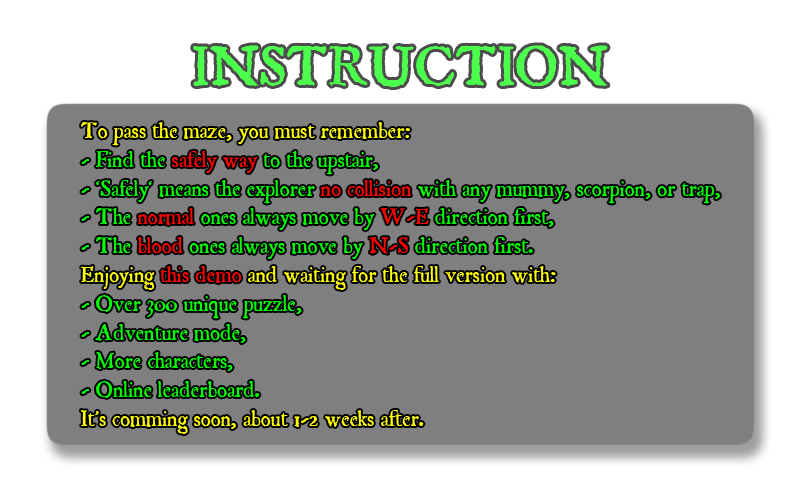
<style>
.page{position:relative;width:800px;height:480px;background:#7f7f7f}
.page>*{position:absolute;margin:0}
.t1{font:60px "JSL-Ancient";color:#4cff4c}
.t2{font:24px "JSL-Ancient";color:#00ff00}
.t3{font:24px "JSL-Ancient";color:#ffff00}
.t4{font:24px "JSL-Ancient";color:#ff0000}
</style>
<div class="page">
<p class="t1" style="left:193px;top:45px;width:415px;height:42px">INSTRUCTION</p>
<p class="t2" style="left:81px;top:122px;width:639px;height:312px"><span class="t3">To pass the maze, you must remember:<br></span>- Find the <span class="t4">safely way</span> to the upstair,<br>- `Safely` means the explorer <span class="t4">no collision</span> with any mummy, scorpion, or trap,<br>- The <span class="t4">normal</span> ones always move by <span class="t4">W-E</span> direction first,<br>- The <span class="t4">blood</span> ones always move by <span class="t4">N-S</span> direction first.<br><span class="t3">Enjoying </span><span class="t4">this demo</span><span class="t3"> and waiting for the full version with:<br></span>- Over 300 unique puzzle,<br>- Adventure mode,<br>- More characters,<br>- Online leaderboard.<br><span class="t3">It’s comming soon, about 1-2 weeks after.</span></p>
</div>
